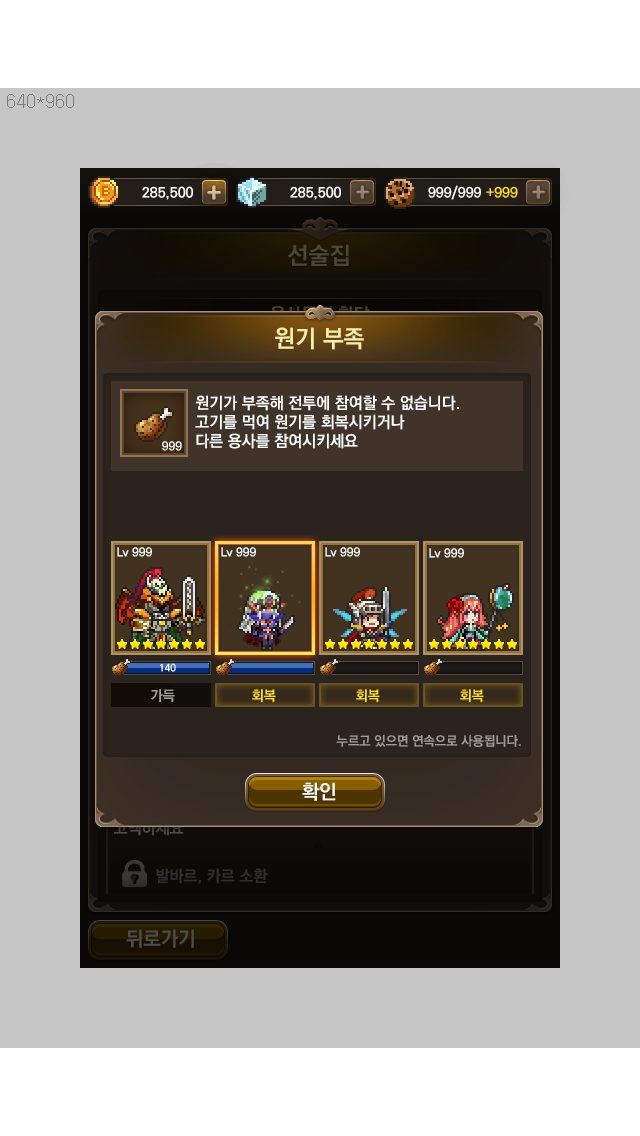
<style>
.page{position:relative;width:640px;height:1136px;background:#c6c6c6}
.page>*{position:absolute;margin:0}
.t1{font:24px "KoPubDotumBold";color:#4c4733}
.t2{font:24px "KoPubDotumBold";color:#ffedab}
.t3{font:16px "KoPubDotumBold";color:#ffffff}
.t4{font:12px "KoPubDotumBold";color:#ffffff}
.t5{font:10px "KoPubDotumBold";color:#fffcee}
.t6{font:14px "KoPubDotumBold";color:#a09f9d}
.t7{font:14px "KoPubDotumBold";color:#ffdc18}
.t8{font:13px "KoPubDotumBold";color:#a09e9d}
.t9{font:20px "KoPubDotumBold";color:#ffffff}
.t10{font:20px "KoPubDotumBold";color:#4c4c4c}
</style>
<div class="page">
<p class="t1" style="left:287px;top:244px;width:62px;height:22px">선술집</p>
<p class="t2" style="left:275px;top:327px;width:89px;height:23px">원기 부족</p>
<p class="t3" style="left:195px;top:395px;width:264px;height:54px">원기가 부족해 전투에 참여할 수 없습니다. <br>고기를 먹여 원기를 회복시키거나 <br>다른 용사를 참여시키세요</p>
<p class="t4" style="left:162px;top:441px;width:20px;height:10px">999</p>
<p class="t4" style="left:117px;top:547px;width:35px;height:10px">Lv 999</p>
<p class="t4" style="left:221px;top:547px;width:35px;height:10px">Lv 999</p>
<p class="t4" style="left:325px;top:547px;width:35px;height:10px">Lv 999</p>
<p class="t4" style="left:429px;top:548px;width:35px;height:10px">Lv 999</p>
<p class="t5" style="left:160px;top:663px;width:16px;height:9px">140</p>
<p class="t6" style="left:151px;top:689px;width:24px;height:13px">가득</p>
<p class="t7" style="left:252px;top:689px;width:24px;height:13px">회복</p>
<p class="t8" style="left:336px;top:735px;width:185px;height:12px">누르고 있으면 연속으로 사용됩니다.</p>
<p class="t9" style="left:302px;top:782px;width:34px;height:19px">확인</p>
<p class="t10" style="left:126px;top:929px;width:68px;height:19px">뒤로가기</p>
</div>
